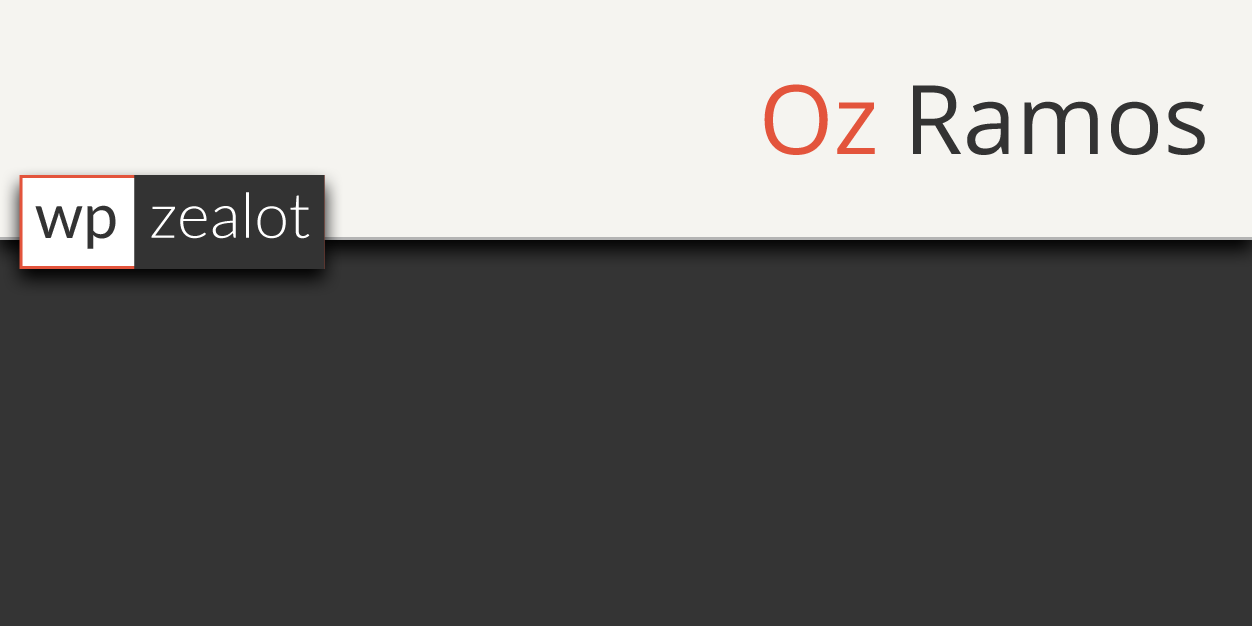
<style>
.page{position:relative;width:1252px;height:626px;background:#343434}
.page>*{position:absolute;margin:0}
.t1{font:96px "OpenSans";color:#333333}
.t2{font:96px "OpenSans";color:#e3543c}
.t3{font:62.6px "Lato-Light";color:#ffffff}
.t4{font:62.6px "Lato-Regular";color:#333333}
</style>
<div class="page">
<p class="t1" style="left:764px;top:84px;width:441px;height:71px"><span class="t2">Oz</span> Ramos</p>
<p class="t3" style="left:151px;top:192px;width:159px;height:47px">zealot</p>
<p class="t4" style="left:35px;top:205px;width:81px;height:44px">wp</p>
</div>
